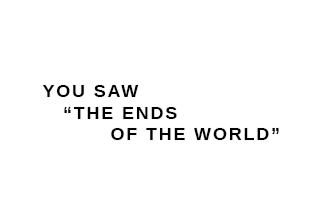
<style>
.page{position:relative;width:320px;height:224px;background:#ffffff}
.page>*{position:absolute;margin:0}
.t1{font:18px "LiberationSans-Bold";letter-spacing:0.1em;color:#000000}
</style>
<div class="page">
<p class="t1" style="left:42px;top:85px;width:237px;height:55px">YOU SAW<br>   “THE ENDS<br>          OF THE WORLD”</p>
</div>
